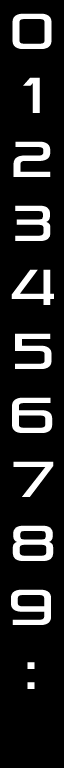
<style>
.page{position:relative;width:64px;height:768px;background:#000000}
.page>*{position:absolute;margin:0}
.t1{font:50px "PirulenRg-Regular";color:#ffffff}
</style>
<div class="page">
<p class="t1" style="left:12px;top:13px;width:40px;height:36px">0</p>
<p class="t1" style="left:23px;top:77px;width:17px;height:36px">1</p>
<p class="t1" style="left:13px;top:141px;width:38px;height:36px">2</p>
<p class="t1" style="left:15px;top:205px;width:36px;height:36px">3</p>
<p class="t1" style="left:11px;top:269px;width:43px;height:36px">4</p>
<p class="t1" style="left:15px;top:333px;width:37px;height:36px">5</p>
<p class="t1" style="left:12px;top:397px;width:41px;height:36px">6</p>
<p class="t1" style="left:13px;top:461px;width:41px;height:36px">7</p>
<p class="t1" style="left:12px;top:525px;width:42px;height:36px">8</p>
<p class="t1" style="left:11px;top:589px;width:40px;height:36px">9</p>
<p class="t1" style="left:27px;top:662px;width:8px;height:27px">:</p>
</div>
